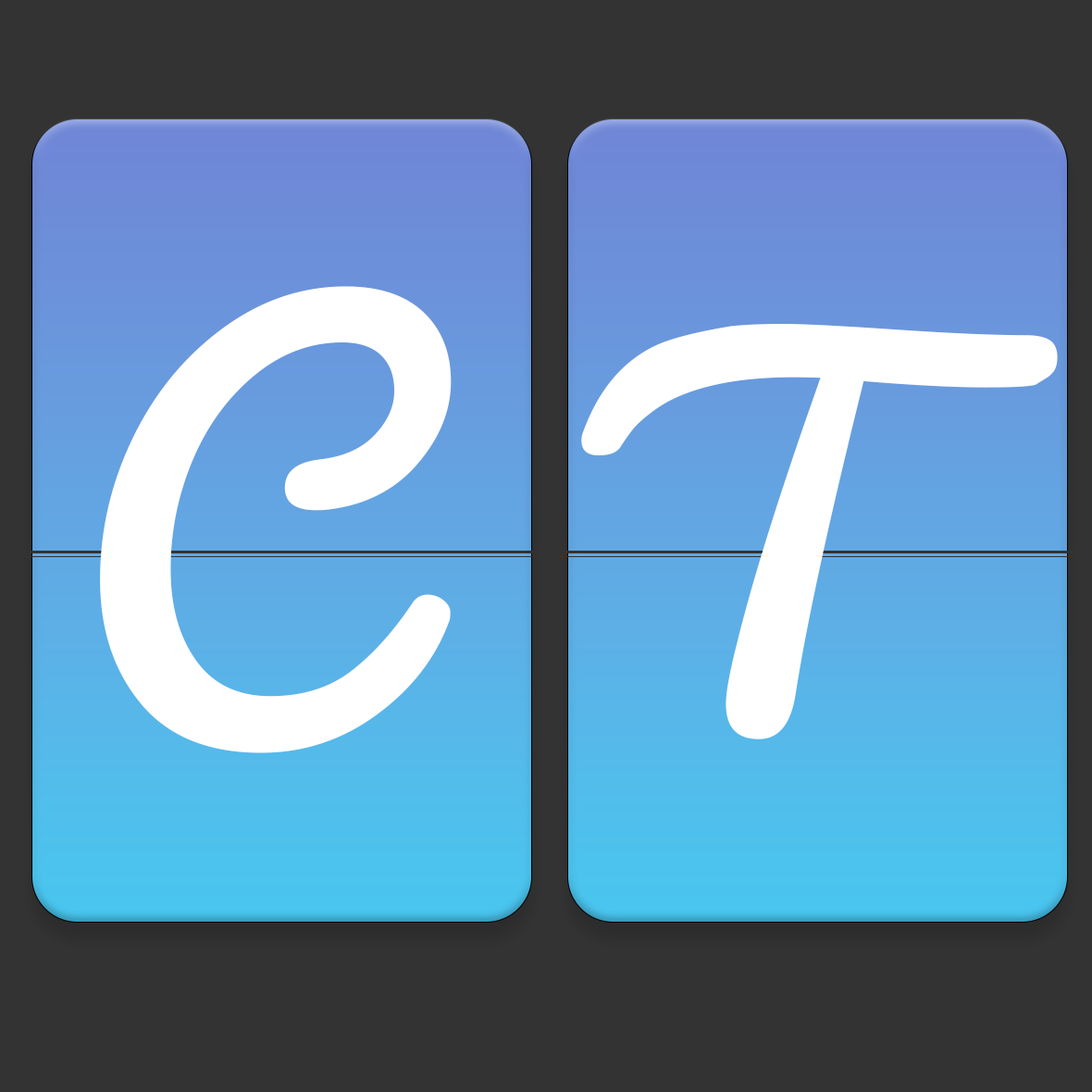
<style>
.page{position:relative;width:1092px;height:1092px;background:#333333}
.page>*{position:absolute;margin:0}
.t1{font:608px "Pacifico-Bold";color:#ffffff}
.t2{font:566.4px "Pacifico-Bold";color:#ffffff}
</style>
<div class="page">
<p class="t1" style="left:100px;top:286px;width:352px;height:467px">C</p>
<p class="t2" style="left:581px;top:324px;width:477px;height:415px">T</p>
</div>
